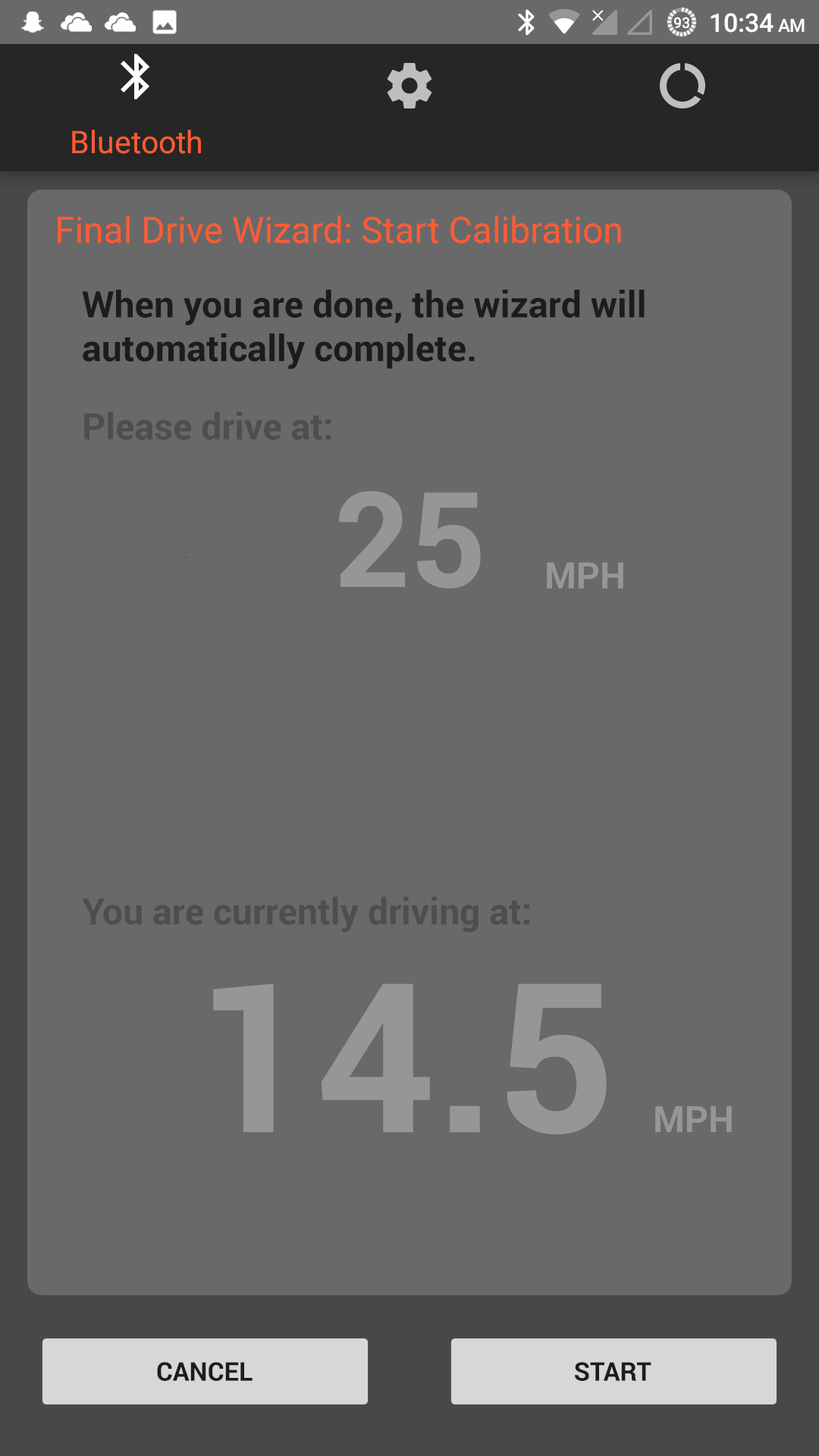
<style>
.page{position:relative;width:819px;height:1456px;background:#696969}
.page>*{position:absolute;margin:0}
.t1{font:36.4px "Roboto-Regular";color:#ff5c33}
.t2{font:36.4px "Roboto-Bold";color:#1c1c1c}
.t3{font:36.4px "Roboto-Bold";color:#4e4e4e}
.t4{font:132.7px "Roboto-Bold";color:#969696}
.t5{font:36.4px "Roboto-Bold";color:#969696}
.t6{font:208.5px "Roboto-Bold";color:#969696}
.t7{font:25.8px "Roboto-Bold";color:#1c1c1c}
</style>
<div class="page">
<p class="t1" style="left:58px;top:215px;width:563px;height:28px">Final Drive Wizard: Start Calibration</p>
<p class="t2" style="left:82px;top:290px;width:563px;height:79px">When you are done, the wizard will<br>automatically complete.</p>
<p class="t3" style="left:84px;top:412px;width:247px;height:28px">Please drive at:</p>
<p class="t4" style="left:339px;top:491px;width:142px;height:97px">25</p>
<p class="t5" style="left:547px;top:562px;width:76px;height:26px">MPH</p>
<p class="t3" style="left:82px;top:896px;width:447px;height:37px">You are currently driving at:</p>
<p class="t6" style="left:213px;top:984px;width:394px;height:150px">14.5</p>
<p class="t5" style="left:655px;top:1106px;width:77px;height:26px">MPH</p>
<p class="t7" style="left:157px;top:1362px;width:96px;height:19px">CANCEL</p>
<p class="t7" style="left:575px;top:1362px;width:76px;height:19px">START</p>
</div>
